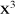
<style>
.page{position:relative;width:15px;height:14px;background:#ffffff}
.page>*{position:absolute;margin:0}
.t1{font:18px "TimesNewRomanPSMT";color:#000000;scale:1.1 1}
</style>
<div class="page">
<p class="t1" style="left:0px;top:0px;width:15px;height:14px">x3</p>
</div>
